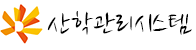
<style>
.page{position:relative;width:196px;height:50px;background:#ffffff}
.page>*{position:absolute;margin:0}
.t1{font:32.1px "NanumBrush";color:#000000}
</style>
<div class="page">
<p class="t1" style="left:47px;top:11px;width:145px;height:24px">산학관리시스템</p>
</div>
